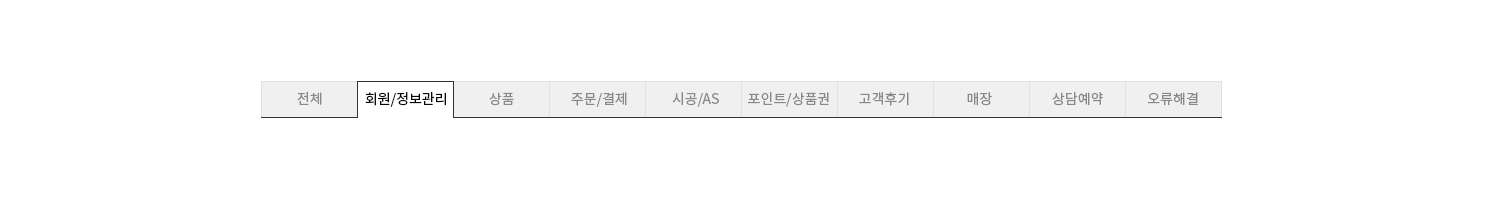
<style>
.page{position:relative;width:1500px;height:200px;background:#ffffff}
.page>*{position:absolute;margin:0}
.t1{font:14px "NotoSansKR-Regular";color:#888888}
.t2{font:14px "NotoSansKR-Regular";color:#070707}
</style>
<div class="page">
<p class="t1" style="left:297px;top:92px;width:25px;height:13px">전체</p>
<p class="t2" style="left:365px;top:92px;width:81px;height:15px">회원/정보관리</p>
<p class="t1" style="left:489px;top:92px;width:709px;height:15px">상품                  주문/결제              시공/AS         포인트/상품권         고객후기                  매장                   상담예약              오류해결</p>
</div>
